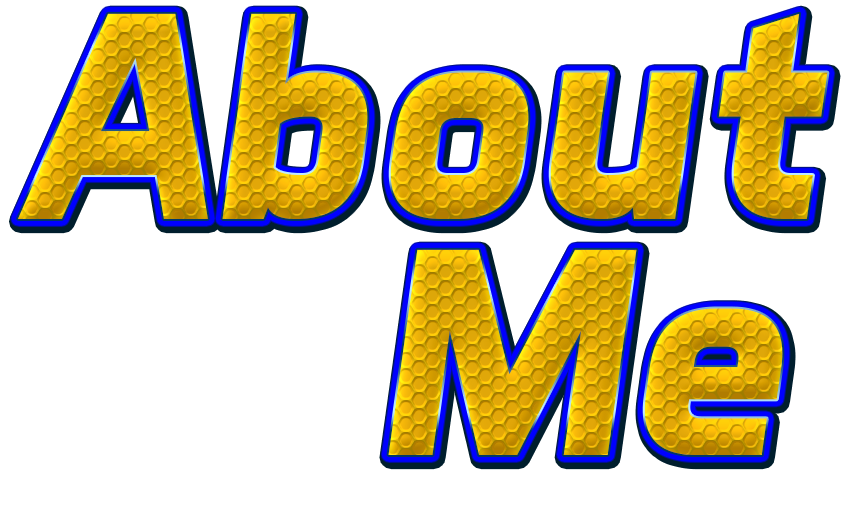
<style>
.page{position:relative;width:850px;height:512px;background:#ffffff}
.page>*{position:absolute;margin:0}
.t1{font:300px "AeroMaticsBoldItalic"}
</style>
<div class="page">
<p class="t1" style="left:18px;top:13px;width:810px;height:206px">About</p>
<p class="t1" style="left:388px;top:249px;width:395px;height:206px">Me</p>
</div>
